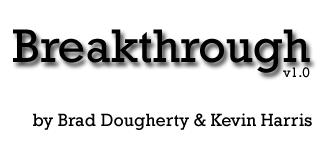
<style>
.page{position:relative;width:325px;height:154px;background:#ffffff}
.page>*{position:absolute;margin:0}
.t1{font:48px "Rockwell";color:#000000}
.t2{font:14px "Rockwell";color:#000000}
.t3{font:18px "Rockwell";color:#000000}
</style>
<div class="page">
<p class="t1" style="left:13px;top:29px;width:297px;height:44px">Breakthrough</p>
<p class="t2" style="left:283px;top:67px;width:27px;height:11px">v1.0</p>
<p class="t3" style="left:33px;top:113px;width:279px;height:17px">by Brad Dougherty &amp; Kevin Harris</p>
</div>
